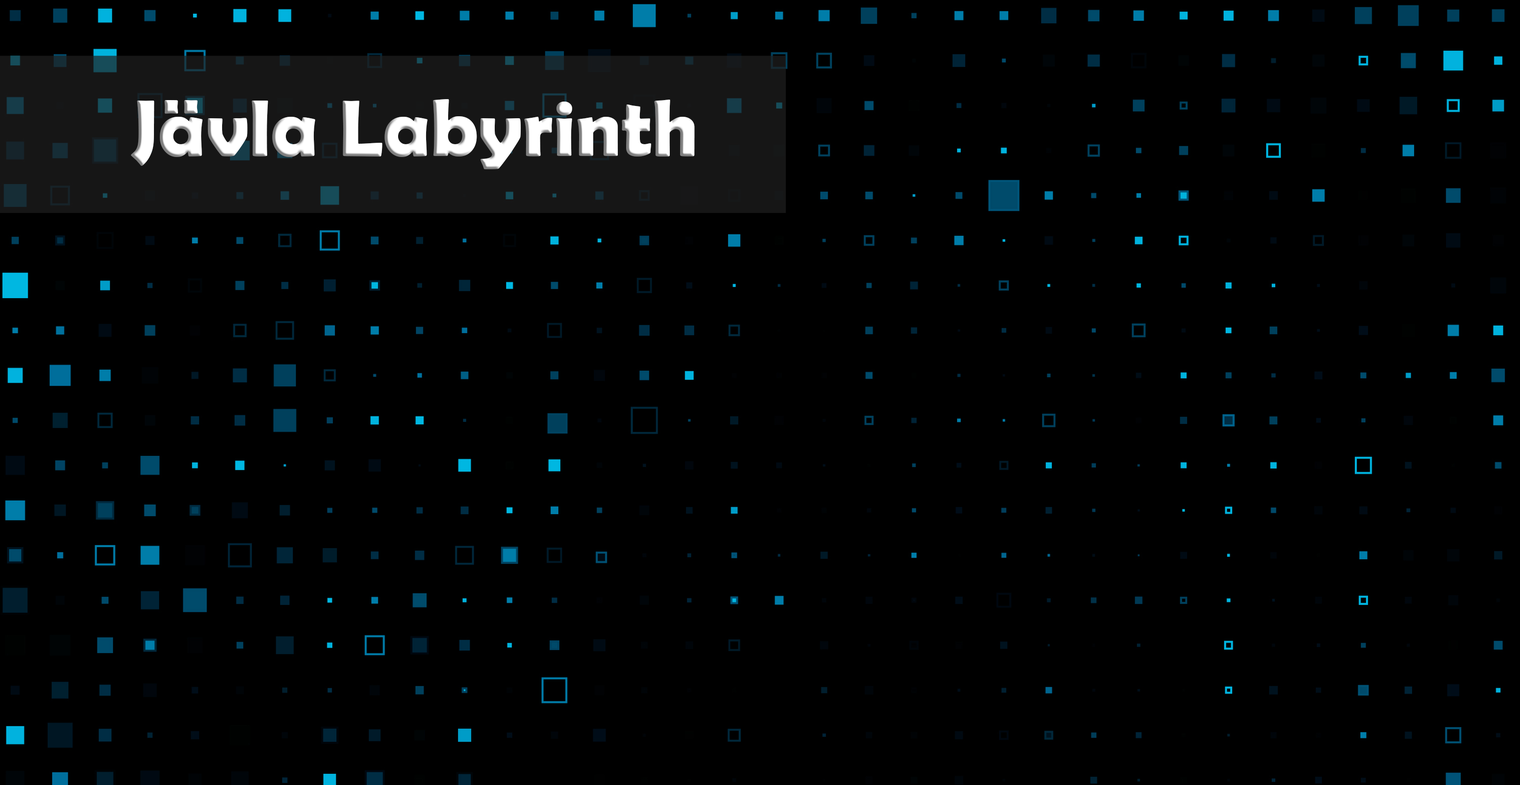
<style>
.page{position:relative;width:1520px;height:785px;background:#000000}
.page>*{position:absolute;margin:0}
.t1{font:81.1px "BerlinSansFBDemi-Bold";color:#ffffff}
</style>
<div class="page">
<p class="t1" style="left:131px;top:99px;width:564px;height:70px">Jävla Labyrinth</p>
</div>
